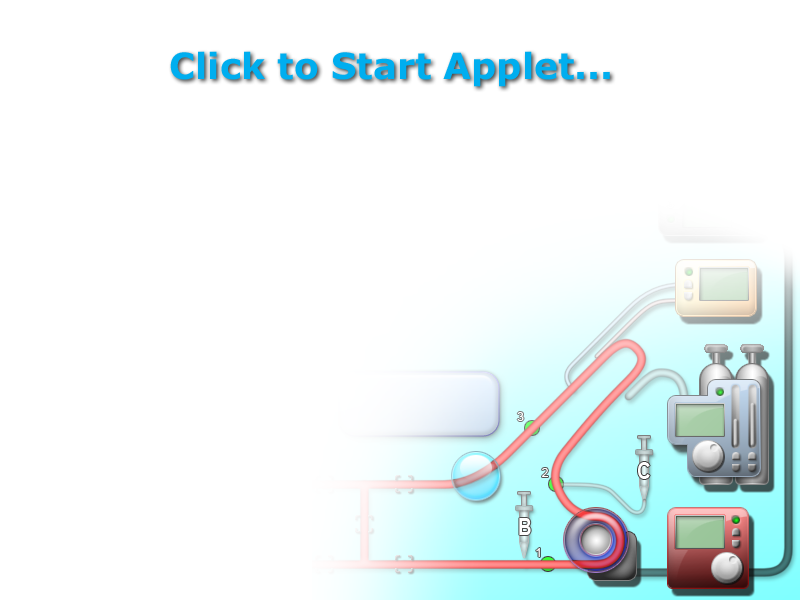
<style>
.page{position:relative;width:800px;height:600px;background:#ffffff}
.page>*{position:absolute;margin:0}
.t1{font:36px "Verdana-Bold";color:#00aeef}
</style>
<div class="page">
<p class="t1" style="left:170px;top:51px;width:440px;height:36px">Click to Start Applet...</p>
</div>
